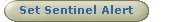
<style>
.page{position:relative;width:179px;height:22px;background:#ffffff}
.page>*{position:absolute;margin:0}
.t1{font:11px "Verdana-Bold";color:#336699}
</style>
<div class="page">
<p class="t1" style="left:20px;top:5px;width:113px;height:9px">Set Sentinel Alert</p>
</div>
